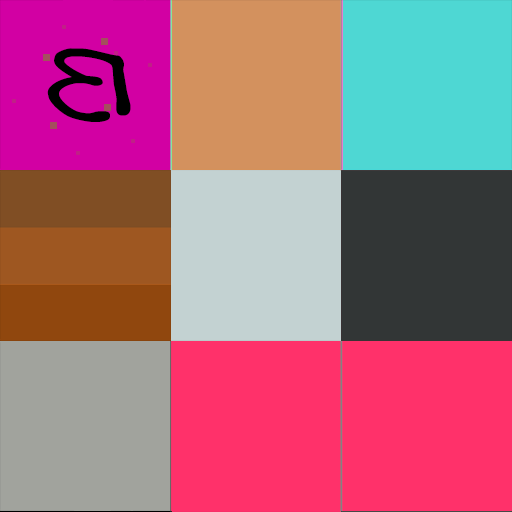
<style>
.page{position:relative;width:512px;height:512px;background:#ff316a}
.page>*{position:absolute;margin:0}
.t1{font:94.6px "SegoeScript";color:#000000;scale:1.4 1}
</style>
<div class="page">
<p class="t1" style="left:47px;top:48px;width:84px;height:74px;rotate:180deg">B</p>
</div>
